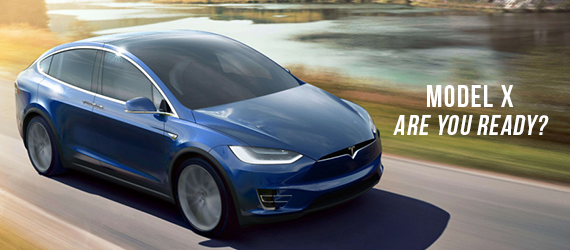
<style>
.page{position:relative;width:570px;height:250px}
.page>*{position:absolute;margin:0}
.t1{font:30.6px "BebasNeueBold";letter-spacing:0.04em;color:#ffffff}
.t2{font:27.7px "BebasNeueBold";letter-spacing:0.04em;color:#ffffff;font-style:italic}
</style>
<div class="page">
<p class="t1" style="left:427px;top:85px;width:87px;height:22px">Model x</p>
<p class="t2" style="left:393px;top:115px;width:156px;height:20px">Are you ready?</p>
</div>
